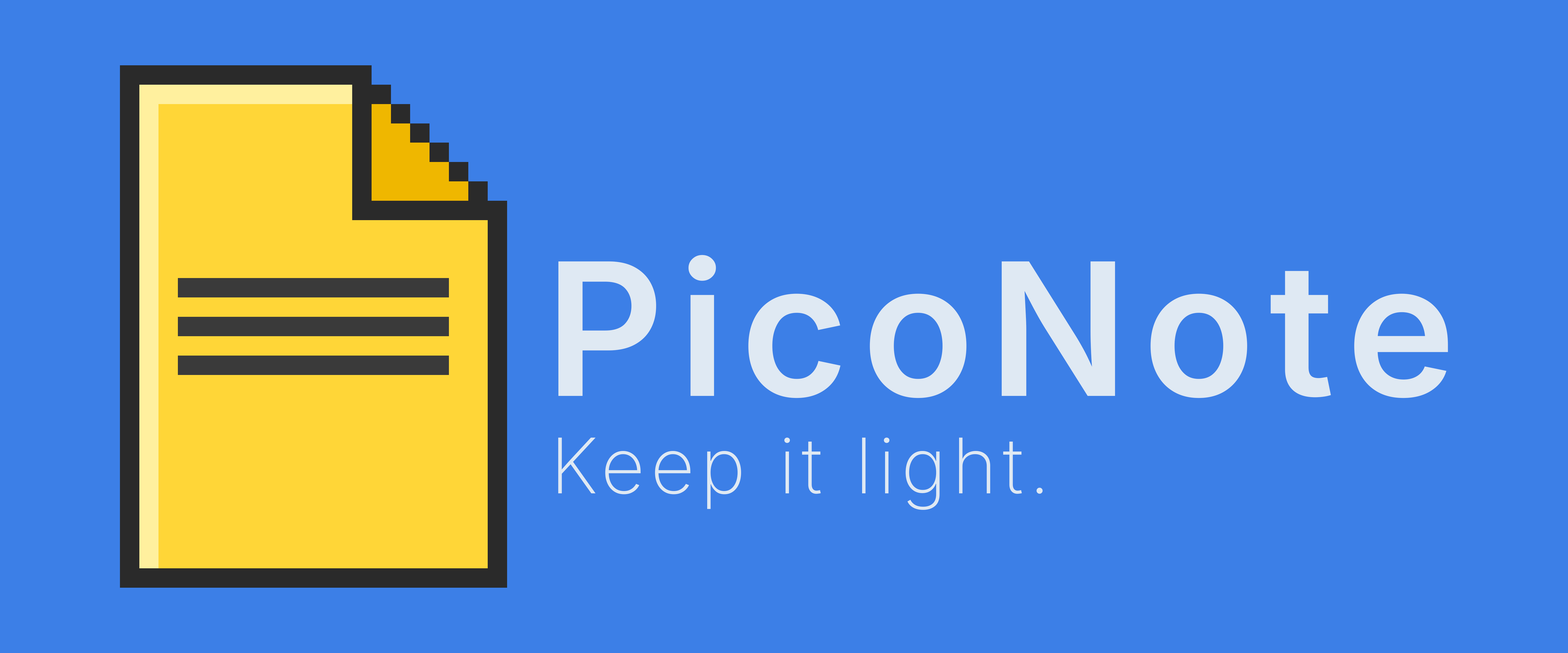
<style>
.page{position:relative;width:1568px;height:653px;background:#3c7fe7}
.page>*{position:absolute;margin:0}
.t1{font:184.9px "Inter-SemiBold";letter-spacing:0.075em;color:#dfe9f3}
.t2{font:76.6px "Inter-ExtraLight";letter-spacing:0.075em;color:#dfe9f3}
</style>
<div class="page">
<p class="t1" style="left:558px;top:255px;width:890px;height:143px">PicoNote</p>
<p class="t2" style="left:558px;top:438px;width:485px;height:72px">Keep it light.</p>
</div>
